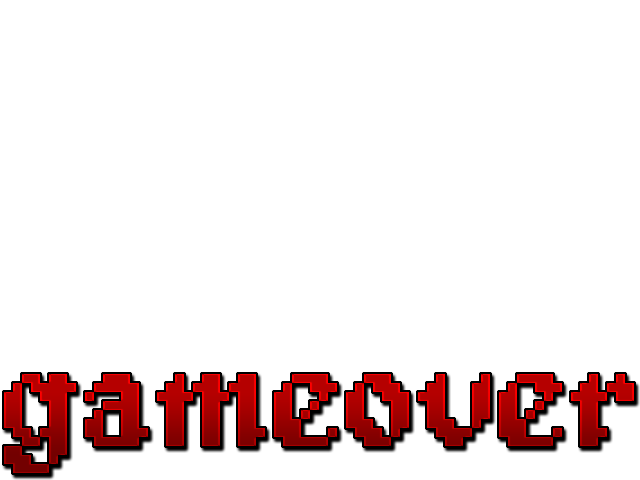
<style>
.page{position:relative;width:640px;height:480px;background:#ffffff}
.page>*{position:absolute;margin:0}
.t1{font:144px "Alagard"}
</style>
<div class="page">
<p class="t1" style="left:4px;top:374px;width:630px;height:99px">gameover</p>
</div>
